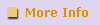
<style>
.page{position:relative;width:100px;height:25px;background:#e0d5f1}
.page>*{position:absolute;margin:0}
.t1{font:12px "Verdana-Bold";color:#dd9303}
</style>
<div class="page">
<p class="t1" style="left:26px;top:7px;width:62px;height:10px">More Info</p>
</div>
